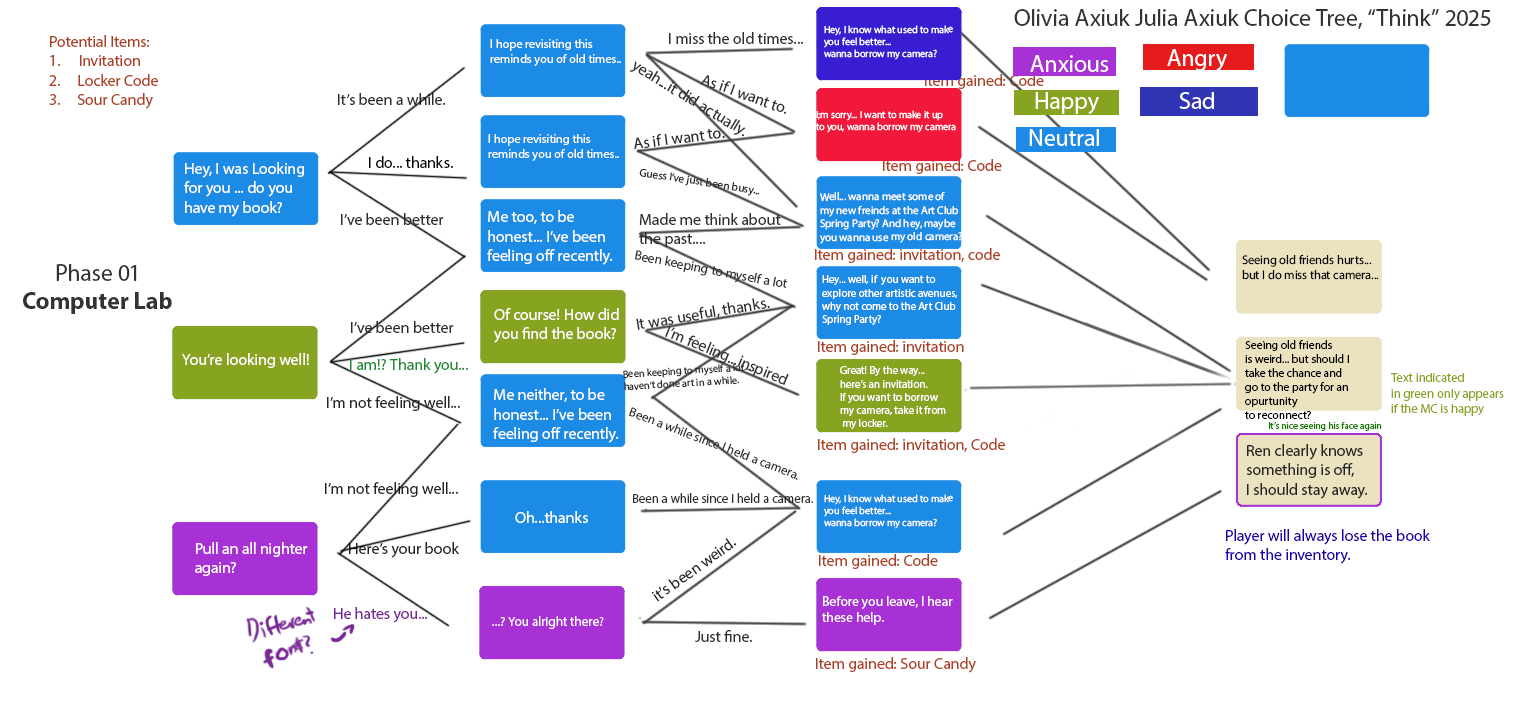
<style>
.page{position:relative;width:1516px;height:707px;background:#ffffff}
.page>*{position:absolute;margin:0}
.t1{font:24px "MyriadPro-Regular";color:#333333}
.t2{font:10.2px "MyriadPro-Regular";color:#ffffff}
.t3{font:16px "MyriadPro-Regular";color:#ad4022}
.t4{font:12.4px "MyriadPro-Regular";color:#ffffff}
.t5{font:16px "MyriadPro-Regular";color:#2d2d2d}
.t6{font:16px "MyriadPro-Regular";color:#000000}
.t7{font:16px "MyriadPro-Regular";color:#ffffff}
.t8{font:11.3px "MyriadPro-Regular";color:#2d2d2d}
.t9{font:11.1px "MyriadPro-Regular";color:#ffffff}
.t10{font:13.4px "MyriadPro-Regular";color:#2d2d2d}
.t11{font:12.5px "MyriadPro-Regular";color:#000000}
.t12{font:11px "MyriadPro-Regular";color:#ffffff}
.t13{font:24px "MyriadPro-Bold";color:#333333}
.t14{font:16px "MyriadPro-Regular";color:#313130}
.t15{font:11.8px "MyriadPro-Regular";color:#000000}
.t16{font:16px "MyriadPro-Regular";color:#1f8a2f}
.t17{font:10.5px "MyriadPro-Regular";color:#2d2d2d}
.t18{font:12.7px "MyriadPro-Regular";color:#87a421}
.t19{font:16px "MyriadPro-Regular";color:#252525}
.t20{font:12.8px "MyriadPro-Regular";color:#2d2d2d}
.t21{font:9.7px "MyriadPro-Regular";color:#177a00}
.t22{font:16px "MyriadPro-Regular";color:#1900a7}
.t23{font:13.8px "MyriadPro-Regular";color:#ffffff}
.t24{font:16px "MyriadPro-Regular";color:#752693}
.t25{font:13.3px "MyriadPro-Regular";color:#ffffff}
.t26{font:16px "MyriadPro-Regular";color:#313131}
</style>
<div class="page">
<p class="t1" style="left:1014px;top:9px;width:477px;height:20px">Olivia Axiuk Julia Axiuk Choice Tree, “Think” 2025</p>
<p class="t2" style="left:824px;top:25px;width:129px;height:35px">Hey, I know what used to make<br>you feel better...<br>wanna borrow my camera?</p>
<p class="t3" style="left:49px;top:35px;width:109px;height:74px">Potential Items:<br>Invitation<br>2.     Locker Code<br>3.     Sour Candy</p>
<p class="t4" style="left:490px;top:39px;width:131px;height:27px">I hope revisiting this<br>reminds you of old times..</p>
<p class="t5" style="left:669px;top:32px;width:135px;height:12px">I miss the old times...</p>
<p class="t5" style="left:629px;top:61px;width:117px;height:76px;rotate:31deg">yeah...it did actually.</p>
<p class="t5" style="left:700px;top:75px;width:86px;height:39px;rotate:20deg">As if I want to.</p>
<p class="t3" style="left:925px;top:74px;width:119px;height:15px">Item gained: Code</p>
<p class="t5" style="left:338px;top:93px;width:108px;height:12px">It’s been a while.</p>
<p class="t2" style="left:816px;top:110px;width:140px;height:23px">I;m sorry... I want to make it up <br>to you, wanna borrow my camera</p>
<p class="t4" style="left:488px;top:134px;width:131px;height:27px">I hope revisiting this<br>reminds you of old times..</p>
<p class="t5" style="left:634px;top:128px;width:91px;height:21px;rotate:-8deg">As if I want to.</p>
<p class="t6" style="left:369px;top:156px;width:84px;height:12px">I do... thanks.</p>
<p class="t3" style="left:883px;top:159px;width:119px;height:15px">Item gained: Code</p>
<p class="t7" style="left:184px;top:162px;width:120px;height:55px">Hey, I was Looking<br>for you ... do you <br>have my book?</p>
<p class="t8" style="left:639px;top:168px;width:121px;height:28px;rotate:9deg">Guess I’ve just been busy...</p>
<p class="t9" style="left:820px;top:191px;width:143px;height:53px">Well... wanna meet some of <br>my new freinds at the Art Club<br>Spring Party? And hey, maybe<br>you wanna use my old camera?</p>
<p class="t5" style="left:341px;top:213px;width:103px;height:12px">I’ve been better</p>
<p class="t7" style="left:487px;top:210px;width:126px;height:55px">Me too, to be <br>honest... I’ve been <br>feeling off recently.</p>
<p class="t5" style="left:639px;top:213px;width:142px;height:34px">Made me think about<br>the past....</p>
<p class="t10" style="left:635px;top:250px;width:153px;height:38px;rotate:11deg">Been keeping to myself a lot</p>
<p class="t3" style="left:815px;top:248px;width:185px;height:15px">Item gained: invitation, code</p>
<p class="t11" style="left:1242px;top:254px;width:137px;height:26px">Seeing old friends hurts...<br>but I do miss that camera...</p>
<p class="t1" style="left:56px;top:264px;width:81px;height:17px">Phase 01</p>
<p class="t12" style="left:822px;top:275px;width:135px;height:50px">Hey... well, if  you want to <br>explore other artistic avenues,<br>why not come to the Art Club<br>Spring Party?</p>
<p class="t13" style="left:23px;top:292px;width:149px;height:22px">Computer Lab</p>
<p class="t14" style="left:636px;top:298px;width:134px;height:32px;rotate:-10deg">It was useful, thanks.</p>
<p class="t7" style="left:494px;top:308px;width:125px;height:35px">Of course! How did<br>you find the book?</p>
<p class="t5" style="left:351px;top:321px;width:103px;height:12px">I’ve been better</p>
<p class="t14" style="left:665px;top:326px;width:124px;height:59px;rotate:22deg">I’m feeling...inspired</p>
<p class="t3" style="left:818px;top:340px;width:146px;height:15px">Item gained: invitation</p>
<p class="t15" style="left:1245px;top:340px;width:104px;height:79px">Seeing old friends <br>is weird... but should I <br>take the chance and <br>go to the party for an <br>opurtunity<br>to reconnect?</p>
<p class="t7" style="left:182px;top:353px;width:127px;height:15px">You’re looking well!</p>
<p class="t16" style="left:350px;top:358px;width:118px;height:16px">I am!? Thank you...</p>
<p class="t17" style="left:623px;top:363px;width:128px;height:28px;rotate:-3deg">Been keeping to myself a lot...<br>haven’t done art in a while.</p>
<p class="t12" style="left:840px;top:366px;width:106px;height:63px">Great! By the way...<br>here’s an invitation.<br>If you want to borrow<br>my camera, take it from<br> my locker.</p>
<p class="t18" style="left:1391px;top:373px;width:113px;height:43px">Text indicated<br>in green only appears<br>if the MC is happy</p>
<p class="t7" style="left:493px;top:388px;width:126px;height:55px">Me neither, to be <br>honest... I’ve been <br>feeling off recently.</p>
<p class="t19" style="left:327px;top:396px;width:133px;height:15px">I’m not feeling well...</p>
<p class="t20" style="left:628px;top:407px;width:170px;height:73px;rotate:21deg">Been a while since I held a camera.</p>
<p class="t21" style="left:1269px;top:422px;width:113px;height:9px">It’s nice seeing his face again</p>
<p class="t3" style="left:818px;top:438px;width:187px;height:15px">Item gained: invitation, Code</p>
<p class="t19" style="left:1246px;top:444px;width:122px;height:55px">Ren clearly knows <br>something is off,<br>I should stay away.</p>
<p class="t19" style="left:325px;top:482px;width:133px;height:15px">I’m not feeling well...</p>
<p class="t20" style="left:633px;top:493px;width:180px;height:10px">Been a while since I held a camera.</p>
<p class="t2" style="left:824px;top:494px;width:129px;height:35px">Hey, I know what used to make<br>you feel better...<br>wanna borrow my camera?</p>
<p class="t7" style="left:515px;top:511px;width:73px;height:12px">Oh...thanks</p>
<p class="t22" style="left:1225px;top:529px;width:205px;height:35px">Player will always lose the book<br>from the inventory.</p>
<p class="t7" style="left:195px;top:542px;width:113px;height:34px">Pull an all nighter<br>again?</p>
<p class="t19" style="left:349px;top:542px;width:110px;height:16px">Here’s your book</p>
<p class="t19" style="left:651px;top:538px;width:85px;height:64px;rotate:-36deg">it’s been weird.</p>
<p class="t3" style="left:819px;top:554px;width:119px;height:15px">Item gained: Code</p>
<p class="t23" style="left:822px;top:596px;width:131px;height:29px">Before you leave, I hear <br>these help.</p>
<p class="t24" style="left:334px;top:607px;width:94px;height:16px">He hates you...</p>
<p class="t25" style="left:492px;top:616px;width:112px;height:13px">...? You alright there?</p>
<p class="t26" style="left:695px;top:630px;width:57px;height:12px">Just fine.</p>
<p class="t3" style="left:816px;top:657px;width:160px;height:16px">Item gained: Sour Candy</p>
</div>
